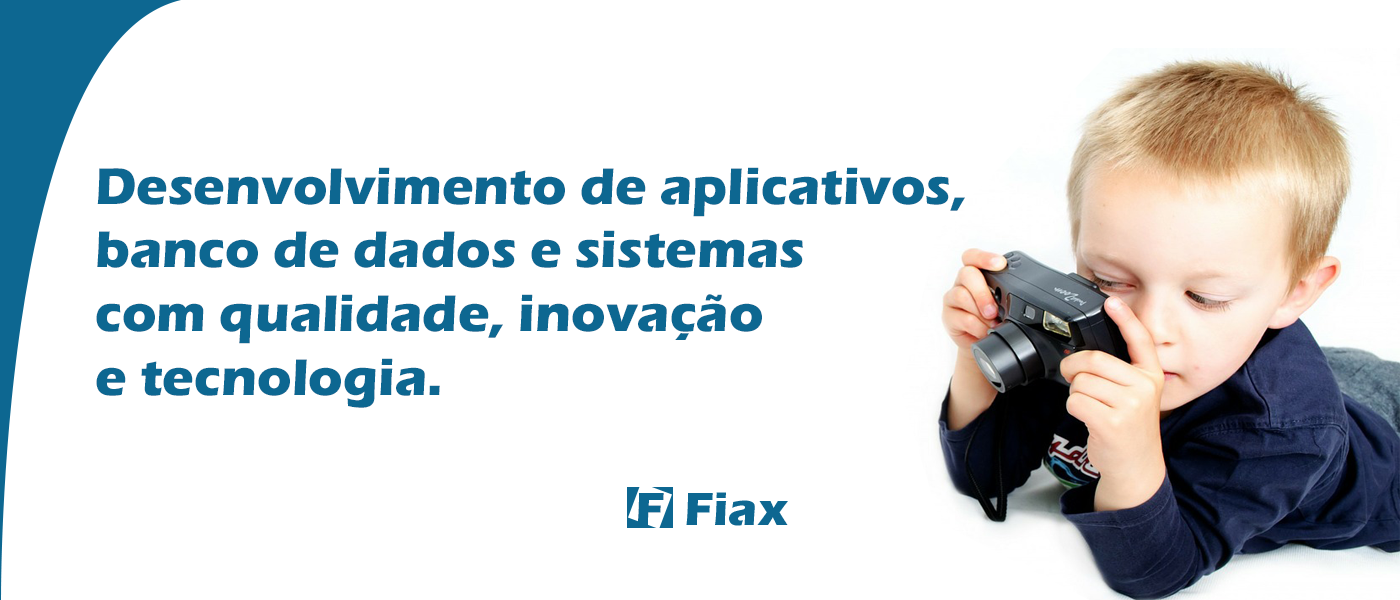
<style>
.page{position:relative;width:1400px;height:600px;background:#ffffff}
.page>*{position:absolute;margin:0}
.t1{font:53.3px "ErasITC-Bold";color:#0d6791}
</style>
<div class="page">
<p class="t1" style="left:96px;top:167px;width:869px;height:241px">Desenvolvimento de aplicativos,<br>banco de dados e sistemas <br>com qualidade, inovação<br>e tecnologia.</p>
</div>
